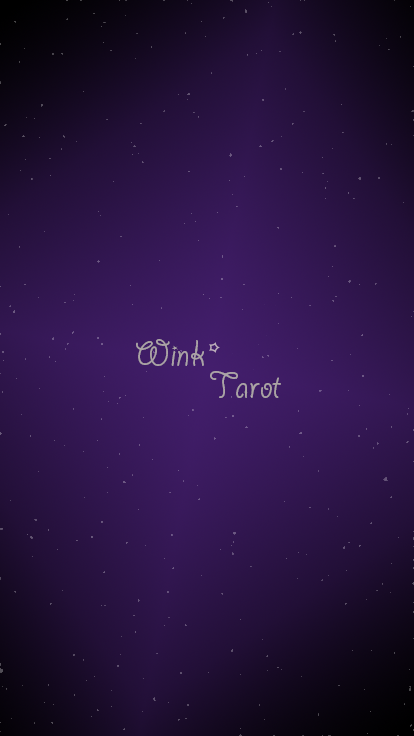
<style>
.page{position:relative;width:414px;height:736px}
.page>*{position:absolute;margin:0}
.t1{font:40px "GiddyupStd";color:#aba3a5}
</style>
<div class="page">
<p class="t1" style="left:136px;top:339px;width:68px;height:27px">Wink</p>
<p class="t1" style="left:210px;top:371px;width:71px;height:27px">Tarot</p>
</div>
